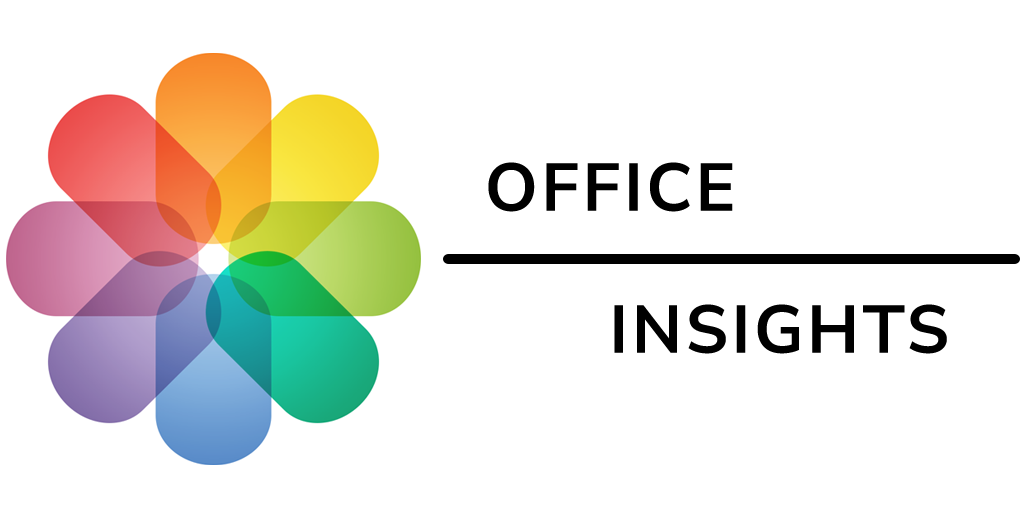
<style>
.page{position:relative;width:1024px;height:514px;background:#ffffff}
.page>*{position:absolute;margin:0}
.t1{font:67.6px "NunitoSans-Bold";letter-spacing:0.05em;color:#000000}
</style>
<div class="page">
<p class="t1" style="left:488px;top:162px;width:245px;height:50px">OFFICE</p>
<p class="t1" style="left:614px;top:304px;width:333px;height:50px">INSIGHTS</p>
</div>
